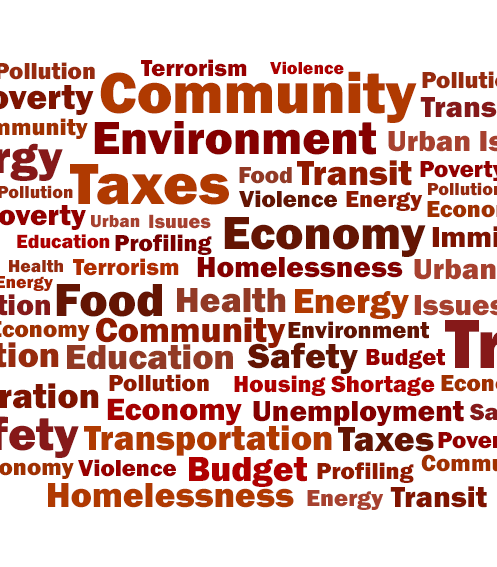
<style>
.page{position:relative;width:497px;height:567px;background:#ffffff}
.page>*{position:absolute;margin:0}
.t1{font:24px "FranklinGothic-Heavy";color:#980000}
.t2{font:18px "FranklinGothic-Heavy";color:#ae0000}
.t3{font:60px "FranklinGothic-Heavy";color:#b03a01}
.t4{font:48px "FranklinGothic-Heavy";color:#850000}
.t5{font:36px "FranklinGothic-Heavy";color:#911b00}
.t6{font:24px "FranklinGothic-Heavy";color:#923a25}
.t7{font:18px "FranklinGothic-Heavy";color:#972b0e}
.t8{font:24px "FranklinGothic-Heavy";color:#641503}
.t9{font:24px "FranklinGothic-Heavy";color:#911b00}
.t10{font:18px "FranklinGothic-Heavy";color:#a7412f}
.t11{font:20px "FranklinGothic-Heavy";color:#a7412f}
.t12{font:48px "FranklinGothic-Heavy";color:#641503}
.t13{font:20px "FranklinGothic-Heavy";color:#ae0000}
.t14{font:24px "FranklinGothic-Heavy";color:#7a0000}
.t15{font:30px "FranklinGothic-Heavy";color:#850000}
.t16{font:24px "FranklinGothic-Heavy";color:#b02e00}
.t17{font:36px "FranklinGothic-Heavy";color:#923a25}
.t18{font:36px "FranklinGothic-Heavy";color:#b03a01}
.t19{font:36px "FranklinGothic-Heavy";color:#641503}
.t20{font:24px "FranklinGothic-Heavy";color:#b00000}
.t21{font:32px "FranklinGothic-Heavy";color:#a60000}
.t22{font:36px "FranklinGothic-Heavy";color:#b00000}
.t23{font:30px "FranklinGothic-Heavy";color:#7f1400}
.t24{font:24px "FranklinGothic-Heavy";color:#a7412f}
</style>
<div class="page">
<p class="t1" style="left:141px;top:59px;width:106px;height:18px">Terrorism</p>
<p class="t2" style="left:270px;top:61px;width:74px;height:14px">Violence</p>
<p class="t3" style="left:100px;top:71px;width:317px;height:52px">Community</p>
<p class="t4" style="left:94px;top:121px;width:282px;height:34px">Environment</p>
<p class="t5" style="left:297px;top:160px;width:115px;height:26px">Transit</p>
<p class="t3" style="left:70px;top:164px;width:159px;height:41px">Taxes</p>
<p class="t6" style="left:239px;top:167px;width:53px;height:17px">Food</p>
<p class="t7" style="left:0px;top:185px;width:73px;height:14px">Pollution</p>
<p class="t8" style="left:239px;top:190px;width:98px;height:18px">Violence</p>
<p class="t9" style="left:346px;top:191px;width:77px;height:20px">Energy</p>
<p class="t10" style="left:91px;top:215px;width:49px;height:13px">Urban</p>
<p class="t11" style="left:149px;top:214px;width:62px;height:15px">Isuues</p>
<p class="t12" style="left:224px;top:217px;width:202px;height:40px">Economy</p>
<p class="t13" style="left:17px;top:234px;width:93px;height:15px">Education</p>
<p class="t14" style="left:115px;top:234px;width:97px;height:21px">Profiling</p>
<p class="t15" style="left:197px;top:257px;width:206px;height:21px">Homelessness</p>
<p class="t7" style="left:9px;top:260px;width:54px;height:13px">Health</p>
<p class="t16" style="left:73px;top:258px;width:106px;height:18px">Terrorism</p>
<p class="t12" style="left:56px;top:284px;width:106px;height:33px">Food</p>
<p class="t17" style="left:177px;top:288px;width:109px;height:25px">Health</p>
<p class="t18" style="left:295px;top:289px;width:114px;height:30px">Energy</p>
<p class="t5" style="left:96px;top:317px;width:190px;height:31px">Community</p>
<p class="t8" style="left:288px;top:321px;width:141px;height:18px">Environment</p>
<p class="t19" style="left:247px;top:342px;width:111px;height:32px">Safety</p>
<p class="t17" style="left:67px;top:344px;width:166px;height:26px">Education</p>
<p class="t1" style="left:366px;top:349px;width:79px;height:20px">Budget</p>
<p class="t9" style="left:109px;top:374px;width:100px;height:18px">Pollution</p>
<p class="t20" style="left:234px;top:375px;width:201px;height:21px">Housing Shortage</p>
<p class="t21" style="left:107px;top:398px;width:135px;height:28px">Economy</p>
<p class="t15" style="left:253px;top:401px;width:211px;height:25px">Unemployment</p>
<p class="t18" style="left:84px;top:425px;width:248px;height:31px">Transportation</p>
<p class="t19" style="left:338px;top:427px;width:96px;height:25px">Taxes</p>
<p class="t1" style="left:78px;top:459px;width:98px;height:18px">Violence</p>
<p class="t22" style="left:189px;top:457px;width:118px;height:30px">Budget</p>
<p class="t9" style="left:317px;top:462px;width:97px;height:21px">Profiling</p>
<p class="t18" style="left:48px;top:483px;width:246px;height:25px">Homelessness</p>
<p class="t23" style="left:390px;top:486px;width:97px;height:22px">Transit</p>
<p class="t24" style="left:307px;top:490px;width:77px;height:20px">Energy</p>
</div>
